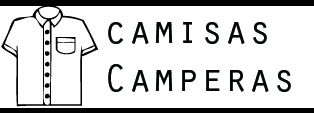
<style>
.page{position:relative;width:314px;height:113px;background:#ffffff}
.page>*{position:absolute;margin:0}
.t1{font:40px "OratorStd";color:#060808}
</style>
<div class="page">
<p class="t1" style="left:108px;top:22px;width:183px;height:70px">camisas<br>Camperas</p>
</div>
